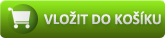
<style>
.page{position:relative;width:165px;height:38px}
.page>*{position:absolute;margin:0}
.t1{font:15px "Calibri-Bold";color:#dedede}
</style>
<div class="page">
<p class="t1" style="left:44px;top:11px;width:117px;height:14px">VLOŽIT DO KOŠÍKU</p>
</div>
